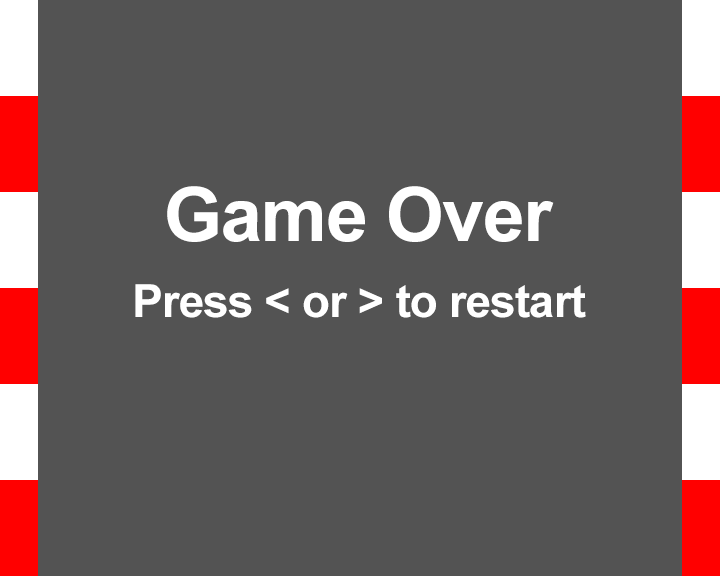
<style>
.page{position:relative;width:720px;height:576px;background:#535353}
.page>*{position:absolute;margin:0}
.t1{font:75px "Arial-BoldMT";letter-spacing:-0.02em;color:#ffffff}
.t2{font:45.8px "Arial-BoldMT";letter-spacing:-0.02em;color:#ffffff}
</style>
<div class="page">
<p class="t1" style="left:167px;top:186px;width:387px;height:56px">Game Over</p>
<p class="t2" style="left:135px;top:284px;width:451px;height:34px">Press &lt; or &gt; to restart</p>
</div>
